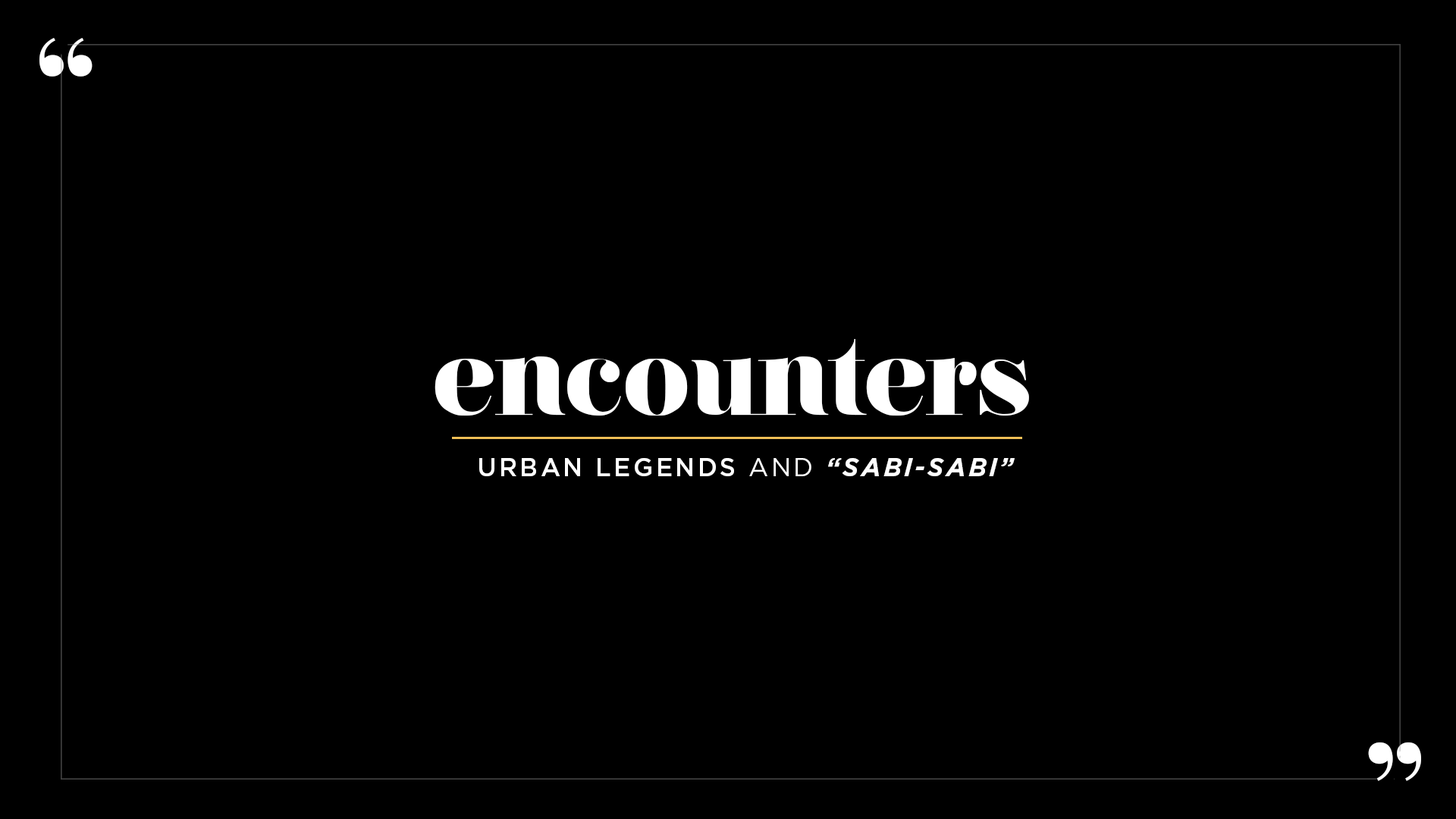
<style>
.page{position:relative;width:1456px;height:819px;background:#000000}
.page>*{position:absolute;margin:0}
.t1{font:137.7px "PlayfairDisplay-Bold";color:#ffffff}
.t2{font:105.3px "NouvelleVague-Black";color:#ffffff}
.t3{font:25.3px "Gotham-Medium";letter-spacing:0.1em;color:#ffffff}
.t4{font:25.3px "Gotham-Book";letter-spacing:0.1em;color:#ffffff}
.t5{font:25.3px "Gotham-BoldItalic";letter-spacing:0.1em;color:#ffffff}
</style>
<div class="page">
<p class="t1" style="left:39px;top:38px;width:54px;height:39px">“</p>
<p class="t2" style="left:435px;top:339px;width:594px;height:77px">encounters</p>
<p class="t3" style="left:479px;top:458px;width:536px;height:18px">URBAN LEGENDS <span class="t4">AND </span><span class="t5">“SABI-SABI”</span></p>
<p class="t1" style="left:1368px;top:742px;width:53px;height:39px">”</p>
</div>
